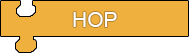
<style>
.page{position:relative;width:189px;height:53px;background:#f0b03d}
.page>*{position:absolute;margin:0}
.t1{font:20.8px "ArialMT";color:#ffffff}
</style>
<div class="page">
<p class="t1" style="left:73px;top:12px;width:44px;height:15px">HOP</p>
</div>
